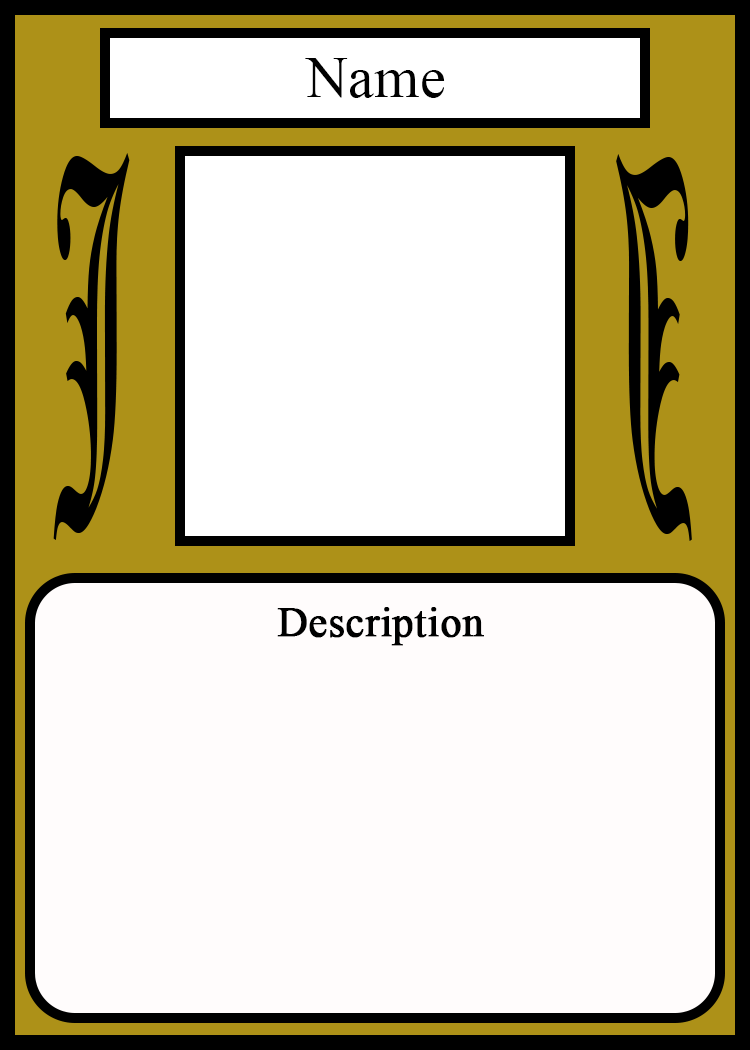
<style>
.page{position:relative;width:750px;height:1050px;background:#fffcfc}
.page>*{position:absolute;margin:0}
.t1{font:58.3px "TimesNewRomanPSMT";color:#010101}
.t2{font:450.1px "OldEnglishTextMT";color:#000000;scale:0.26 1}
.t3{font:449.7px "OldEnglishTextMT";color:#000000;scale:0.26 1}
.t4{font:41.7px "TimesNewRomanPSMT";color:#000000;font-weight:bold}
.t5{font:41.7px "TimesNewRomanPSMT";color:#000000}
</style>
<div class="page">
<p class="t1" style="left:305px;top:58px;width:140px;height:40px">Name</p>
<p class="t2" style="left:53px;top:153px;width:77px;height:387px">J</p>
<p class="t3" style="left:616px;top:154px;width:76px;height:387px;rotate:180deg">J</p>
<p class="t4" style="left:277px;top:607px;width:207px;height:39px"><span class="t5"> </span>Description</p>
</div>
